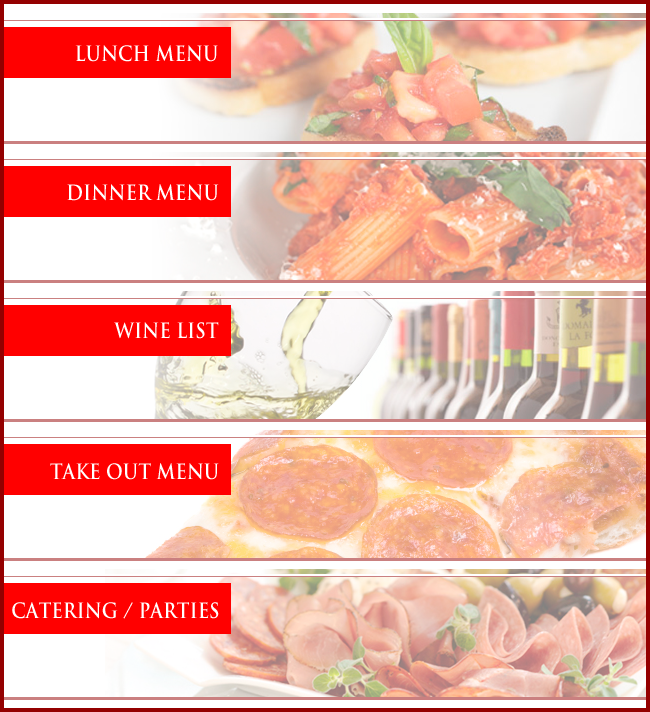
<style>
.page{position:relative;width:650px;height:712px;background:#ffffff}
.page>*{position:absolute;margin:0}
.t1{font:20.6px "TrajanPro-Bold";color:#ffffff;text-transform:uppercase;scale:0.88 1}
</style>
<div class="page">
<p class="t1" style="left:75px;top:45px;width:143px;height:17px">Lunch Menu</p>
<p class="t1" style="left:67px;top:184px;width:152px;height:17px">Dinner Menu</p>
<p class="t1" style="left:114px;top:322px;width:105px;height:17px">Wine List</p>
<p class="t1" style="left:50px;top:463px;width:169px;height:17px">Take Out Menu</p>
<p class="t1" style="left:12px;top:602px;width:207px;height:17px">Catering / Parties</p>
</div>
